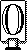
<style>
.page{position:relative;width:27px;height:50px;background:#ffffff}
.page>*{position:absolute;margin:0}
.t1{font:44px "ImprintMT-Shadow";letter-spacing:-0.075em;color:#000000;scale:1.1 1}
</style>
<div class="page">
<p class="t1" style="left:2px;top:4px;width:22px;height:31px">0</p>
</div>
